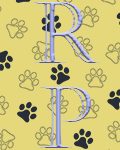
<style>
.page{position:relative;width:120px;height:150px;background:#e4d87a}
.page>*{position:absolute;margin:0}
.t1{font:85.3px "Castellar"}
</style>
<div class="page">
<p class="t1" style="left:34px;top:2px;width:65px;height:146px">RP</p>
</div>
